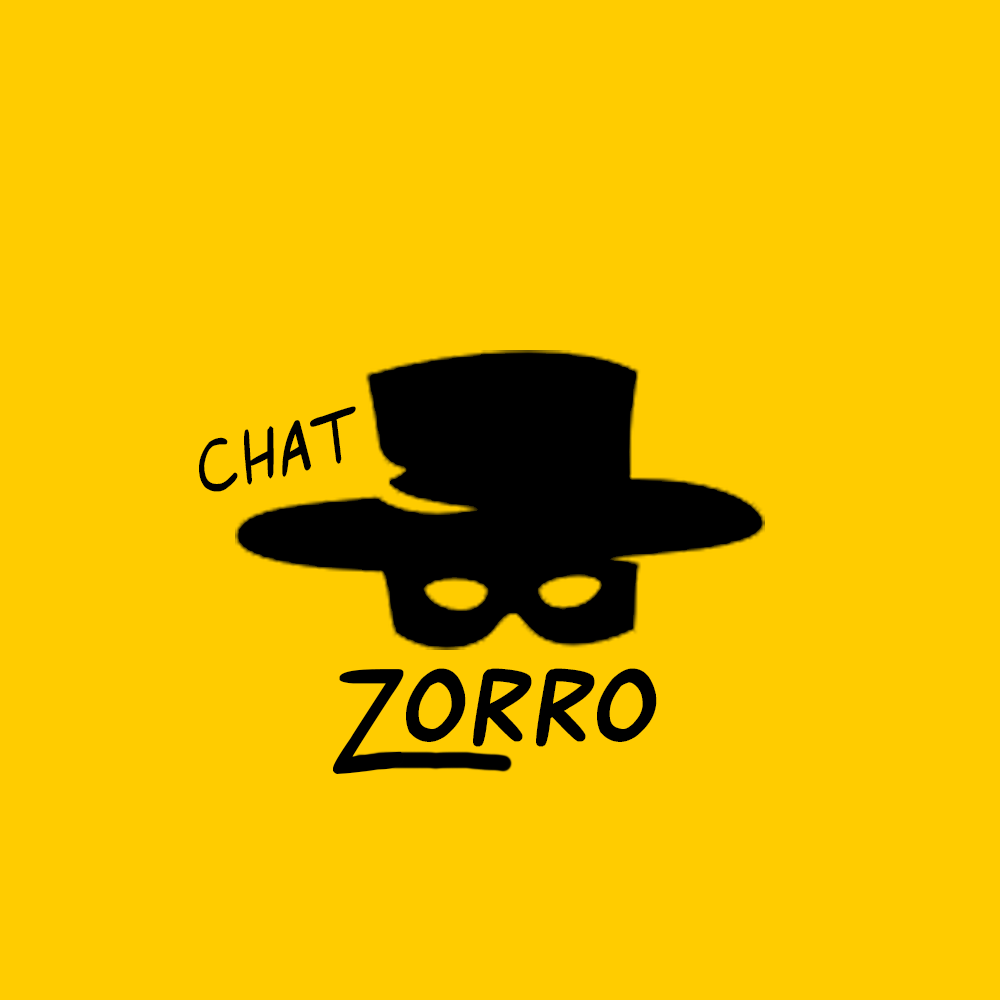
<style>
.page{position:relative;width:1000px;height:1000px;background:#ffcc00}
.page>*{position:absolute;margin:0}
.t1{font:75px "RoofRunners";letter-spacing:0.075em;color:#000000}
.t2{font:150px "RoofRunners";letter-spacing:0.075em;color:#000000}
.t3{font:100px "Roofrunners-Bold";letter-spacing:0.075em;color:#000000}
</style>
<div class="page">
<p class="t1" style="left:199px;top:406px;width:157px;height:86px;rotate:-13deg">CHAT</p>
<p class="t2" style="left:333px;top:669px;width:71px;height:105px">Z</p>
<p class="t3" style="left:406px;top:668px;width:251px;height:79px">orro</p>
</div>
